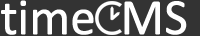
<style>
.page{position:relative;width:200px;height:36px;background:#333333}
.page>*{position:absolute;margin:0}
.t1{font:51px "Calibri";letter-spacing:-0.02em;color:#ffffff;font-weight:bold}
</style>
<div class="page">
<p class="t1" style="left:1px;top:0px;width:186px;height:35px">time  MS</p>
</div>
